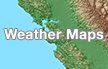
<style>
.page{position:relative;width:108px;height:69px;background:#8ae1ff}
.page>*{position:absolute;margin:0}
.t1{font:14px "HelveticaNeue-Bold";letter-spacing:0.025em;color:#ffffff}
</style>
<div class="page">
<p class="t1" style="left:4px;top:29px;width:100px;height:13px">Weather Maps</p>
</div>
